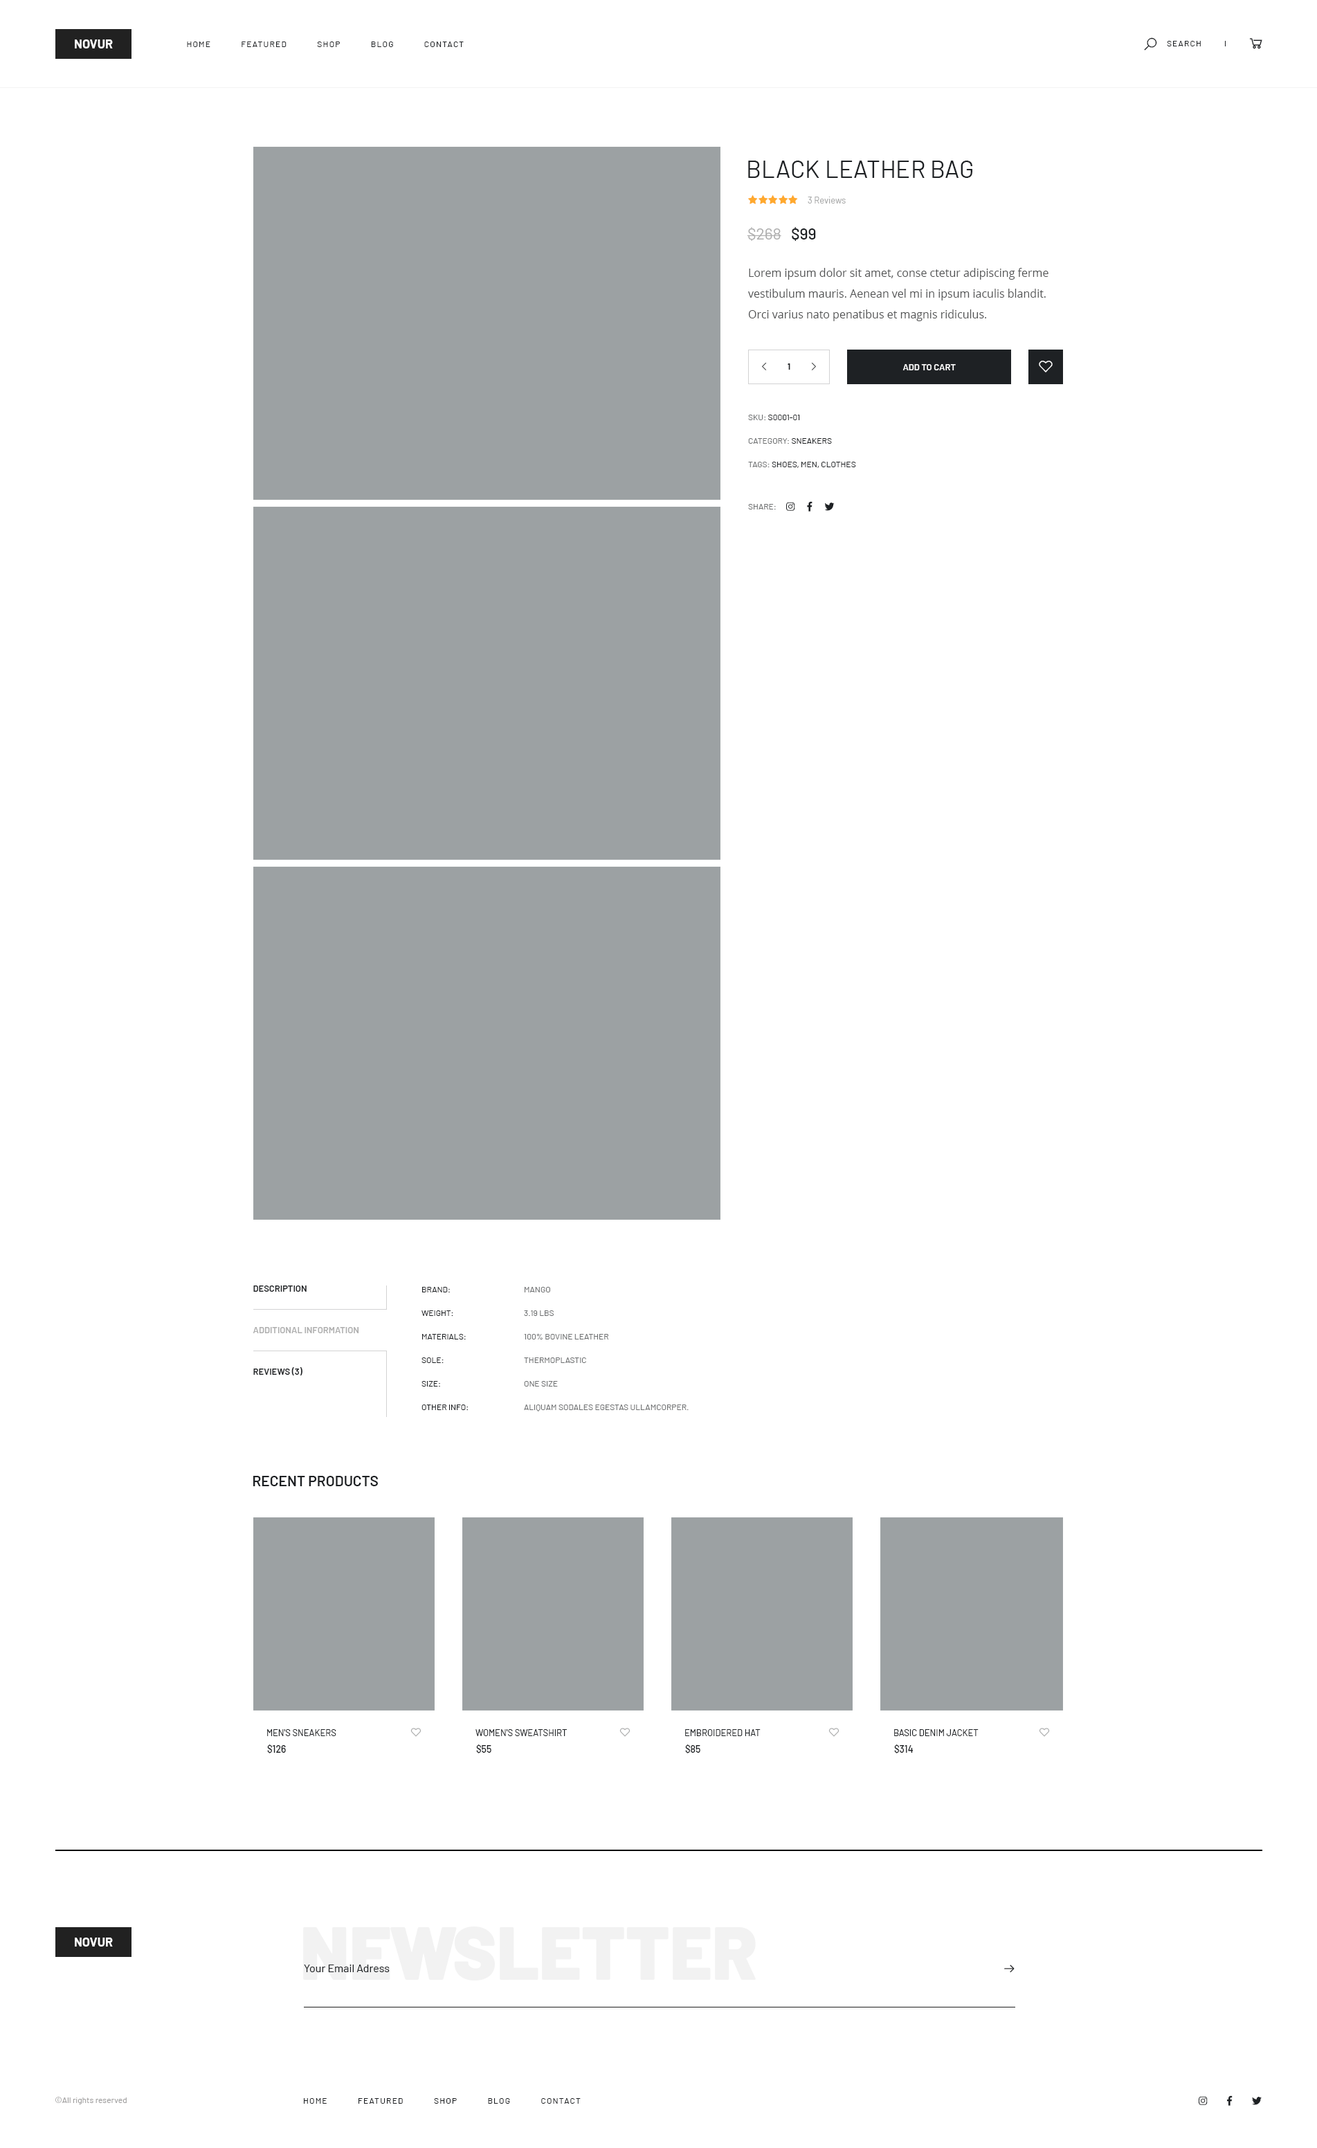
<style>
.page{position:relative;width:1317px;height:2148px;background:#ffffff}
.page>*{position:absolute;margin:0}
.t1{font:12.5px "Barlow-Bold";color:#fefefe;text-transform:uppercase}
.t2{font:8.3px "Barlow-Regular";letter-spacing:0.1em;color:#1e2124;text-transform:uppercase}
.t3{font:24.2px "Barlow-Regular";color:#1e2124;text-transform:uppercase}
.t4{font:9px "Barlow-Regular";color:#aaabab}
.t5{font:15.9px "Barlow-Regular";color:#aeaeae}
.t6{font:15.9px "Barlow-Medium";color:#1e2124}
.t7{font:11.1px/20.8px "OpenSans";color:#535455}
.t8{font:8.3px "Barlow-Bold";color:#1e2124;text-transform:uppercase}
.t9{font:9px "Barlow-SemiBold";color:#ffffff;text-transform:uppercase}
.t10{font:8.3px/23.5px "Barlow-Regular";color:#1e2124;text-transform:uppercase}
.t11{font:8.3px/23.5px "Barlow-Regular";color:#6e7071;text-transform:uppercase}
.t12{font:8.3px "Barlow-Regular";color:#6e7071;text-transform:uppercase}
.t13{font:9px/41.5px "Barlow-SemiBold";color:#aeaeae;text-transform:uppercase}
.t14{font:9px/41.5px "Barlow-SemiBold";color:#1e2124;text-transform:uppercase}
.t15{font:14.5px "Barlow-SemiBold";color:#1e2124;text-transform:uppercase}
.t16{font:9px "Barlow-Regular";color:#1e2124;text-transform:uppercase}
.t17{font:9.7px "Barlow-Medium";color:#1e2124}
.t18{font:74.1px "Barlow-Black";color:#f2f2f2}
.t19{font:11.1px "Barlow-Regular";color:#1e2124}
.t20{font:8.3px "Barlow-Regular";color:#9e9d9d}
</style>
<div class="page">
<p class="t1" style="left:75px;top:39px;width:38px;height:9px">novur</p>
<p class="t2" style="left:187px;top:42px;width:277px;height:5px">Home            Featured            Shop            Blog            Contact</p>
<p class="t2" style="left:1167px;top:41px;width:34px;height:5px">Search</p>
<p class="t3" style="left:748px;top:161px;width:225px;height:17px">Black Leather Bag</p>
<p class="t4" style="left:808px;top:197px;width:38px;height:7px">3 Reviews</p>
<p class="t5" style="left:747px;top:227px;width:35px;height:14px">$268</p>
<p class="t6" style="left:792px;top:227px;width:24px;height:14px">$99</p>
<p class="t7" style="left:748px;top:268px;width:301px;height:53px">Lorem ipsum dolor sit amet, conse ctetur adipiscing ferme    vestibulum mauris. Aenean vel mi in ipsum iaculis blandit. Orci varius nato penatibus et magnis ridiculus.</p>
<p class="t8" style="left:788px;top:363px;width:3px;height:7px">1</p>
<p class="t9" style="left:903px;top:364px;width:53px;height:6px">Add to cart</p>
<p class="t10" style="left:748px;top:415px;width:108px;height:53px"><span class="t11">SKU: </span>S0001-01<br><span class="t11">Category: </span>Sneakers<br><span class="t11">Tags: </span>Shoes, Men, Clothes</p>
<p class="t12" style="left:748px;top:504px;width:28px;height:6px">Share:</p>
<p class="t13" style="left:253px;top:1286px;width:106px;height:90px"><span class="t14">Description<br></span>additional information<br><span class="t14">Reviews (3)</span></p>
<p class="t10" style="left:422px;top:1287px;width:47px;height:123px">Brand:<br>Weight:<br>Materials:<br>Sole:<br>Size:<br>Other Info:</p>
<p class="t11" style="left:524px;top:1287px;width:165px;height:125px">Mango<br>3.19 lbs <br>100% bovine leather<br>Thermoplastic<br>One size<br>Aliquam sodales egestas ullamcorper.</p>
<p class="t15" style="left:253px;top:1476px;width:125px;height:10px">Recent Products</p>
<p class="t16" style="left:267px;top:1729px;width:69px;height:7px">Men's Sneakers</p>
<p class="t16" style="left:476px;top:1729px;width:91px;height:7px">Women's Sweatshirt</p>
<p class="t16" style="left:685px;top:1729px;width:76px;height:7px">Embroidered Hat</p>
<p class="t16" style="left:894px;top:1729px;width:85px;height:7px">Basic Denim Jacket</p>
<p class="t17" style="left:267px;top:1745px;width:19px;height:9px">$126</p>
<p class="t17" style="left:476px;top:1745px;width:16px;height:9px">$55</p>
<p class="t17" style="left:685px;top:1745px;width:16px;height:9px">$85</p>
<p class="t17" style="left:894px;top:1745px;width:20px;height:9px">$314</p>
<p class="t1" style="left:75px;top:1938px;width:38px;height:9px">Novur</p>
<p class="t18" style="left:303px;top:1927px;width:453px;height:54px">NEWSLETTER</p>
<p class="t19" style="left:304px;top:1965px;width:86px;height:7px">Your Email Adress</p>
<p class="t20" style="left:55px;top:2097px;width:72px;height:8px">©All rights reserved</p>
<p class="t2" style="left:304px;top:2098px;width:277px;height:6px">Home            Featured            Shop            Blog            Contact</p>
</div>
